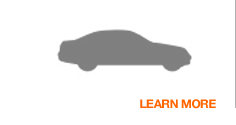
<style>
.page{position:relative;width:236px;height:125px;background:#ffffff}
.page>*{position:absolute;margin:0}
.t1{font:12px "HelveticaNeue-Bold";letter-spacing:-0.04em;color:#ff6600}
</style>
<div class="page">
<p class="t1" style="left:140px;top:99px;width:76px;height:10px">LEARN MORE</p>
</div>
